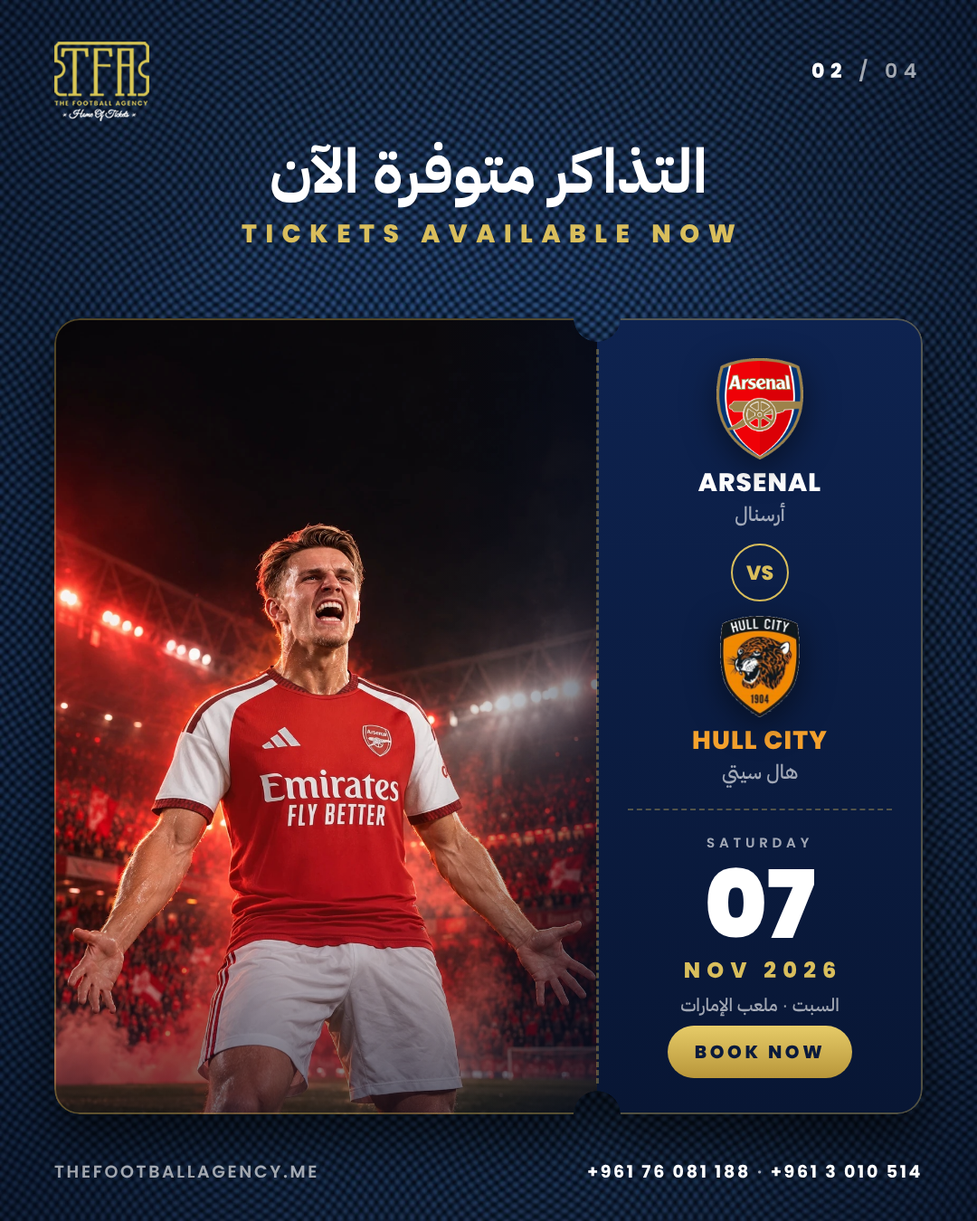
<style>
.page{position:relative;width:977px;height:1221px}
.page>*{position:absolute;margin:0}
.t1{font:19.9px "Poppins-SemiBold";letter-spacing:0.3em;color:#ffffff}
.t2{font:19.9px "Poppins-ExtraBold";letter-spacing:0.3em;color:#ffffff}
.t3{font:61.5px "IBMPlexSansArabic-Bold";color:#ffffff}
.t4{font:25.3px "Poppins-ExtraBold";letter-spacing:0.34em;color:#d9be5c}
.t5{font:25.3px "Poppins-ExtraBold";letter-spacing:0.04em;color:#ffffff}
.t6{font:19.9px "IBMPlexSansArabic-Medium"}
.t7{font:19.9px "Poppins-ExtraBold";color:#d9be5c}
.t8{font:25.3px "Poppins-ExtraBold";letter-spacing:0.04em;color:#f5a12d}
.t9{font:13.6px "Poppins-SemiBold";letter-spacing:0.32em}
.t10{font:94.1px "Poppins-Black";color:#ffffff}
.t11{font:21.7px "Poppins-ExtraBold";letter-spacing:0.3em;color:#d9be5c}
.t12{font:18.1px "IBMPlexSansArabic-Medium"}
.t13{font:18.1px "Poppins-ExtraBold";letter-spacing:0.18em;color:#0a1a3c}
.t14{font:17.2px "Poppins-SemiBold";letter-spacing:0.14em}
.t15{font:17.2px "Poppins-Bold";letter-spacing:0.14em;color:#ffffff}
.t16{font:17.2px "Poppins-SemiBold";letter-spacing:0.14em;color:#ffffff}
</style>
<div class="page">
<p class="t1" style="left:811px;top:59px;width:105px;height:22px"><span class="t2">02</span> / 04</p>
<p class="t3" style="left:271px;top:142px;width:433px;height:66px">التذاكر متوفرة الآن</p>
<p class="t4" style="left:241px;top:224px;width:494px;height:19px">TICKETS AVAILABLE NOW</p>
<p class="t5" style="left:698px;top:473px;width:122px;height:19px">ARSENAL</p>
<p class="t6" style="left:735px;top:502px;width:50px;height:24px">أرسنال</p>
<p class="t7" style="left:746px;top:565px;width:27px;height:16px">VS</p>
<p class="t8" style="left:693px;top:731px;width:134px;height:19px">HULL CITY</p>
<p class="t6" style="left:722px;top:763px;width:76px;height:25px">هال سيتي</p>
<p class="t9" style="left:706px;top:837px;width:103px;height:10px">SATURDAY</p>
<p class="t10" style="left:707px;top:867px;width:107px;height:71px">07</p>
<p class="t11" style="left:685px;top:961px;width:151px;height:18px">NOV 2026</p>
<p class="t12" style="left:681px;top:998px;width:157px;height:18px">السبت · ملعب الإمارات</p>
<p class="t13" style="left:695px;top:1045px;width:127px;height:14px">BOOK NOW</p>
<p class="t14" style="left:54px;top:1165px;width:263px;height:13px">THEFOOTBALLAGENCY.ME</p>
<p class="t15" style="left:588px;top:1164px;width:332px;height:14px">+961 76 081 188<span class="t16"> · </span>+961 3 010 514</p>
</div>
